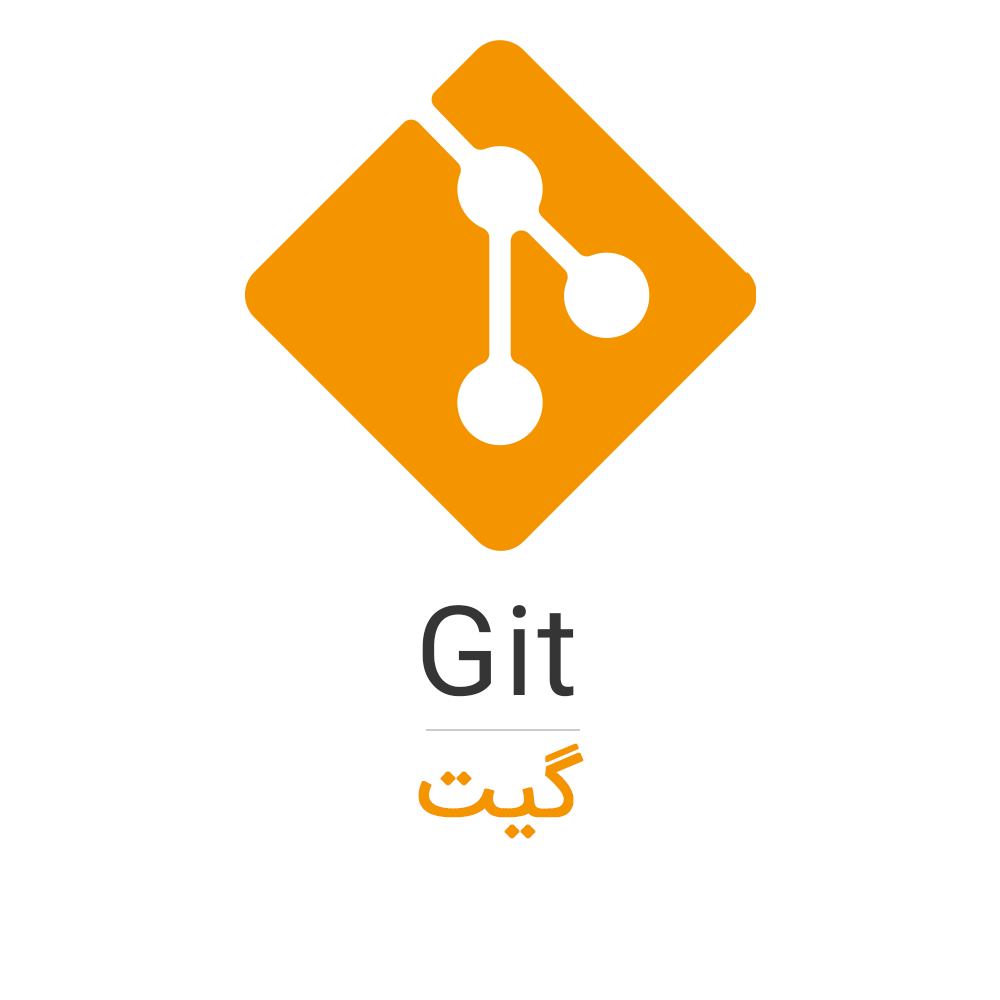
<style>
.page{position:relative;width:1000px;height:1000px;background:#ffffff}
.page>*{position:absolute;margin:0}
.t1{font:116.4px "IRANSansWeb";color:#353535;font-weight:bold}
.t2{font:89.2px "IRANSansWeb";color:#f49500;font-weight:bold}
</style>
<div class="page">
<p class="t1" style="left:422px;top:605px;width:152px;height:92px">Git</p>
<p class="t2" style="left:418px;top:743px;width:166px;height:96px">گیت</p>
</div>
